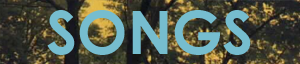
<style>
.page{position:relative;width:300px;height:64px}
.page>*{position:absolute;margin:0}
.t1{font:60px "CenturyGothic-Bold";color:#76bdcf}
</style>
<div class="page">
<p class="t1" style="left:47px;top:10px;width:204px;height:45px">SONGS</p>
</div>
